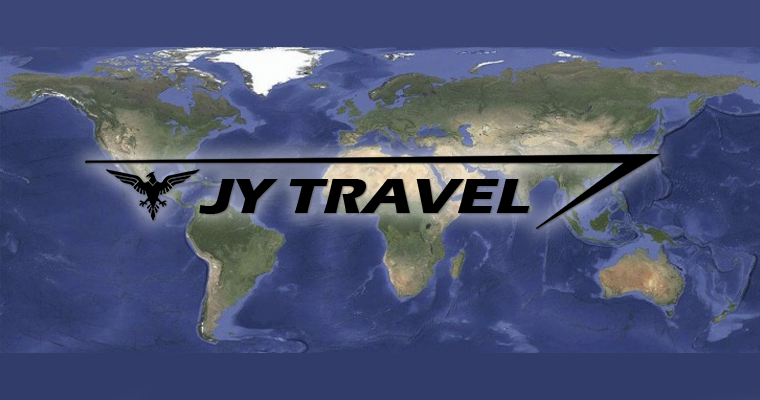
<style>
.page{position:relative;width:760px;height:400px}
.page>*{position:absolute;margin:0}
.t1{font:51.4px "ErasITC-Bold";color:#000000;text-transform:uppercase;font-style:italic;scale:1.15 1}
</style>
<div class="page">
<p class="t1" style="left:199px;top:179px;width:331px;height:35px">JY Travel</p>
</div>
